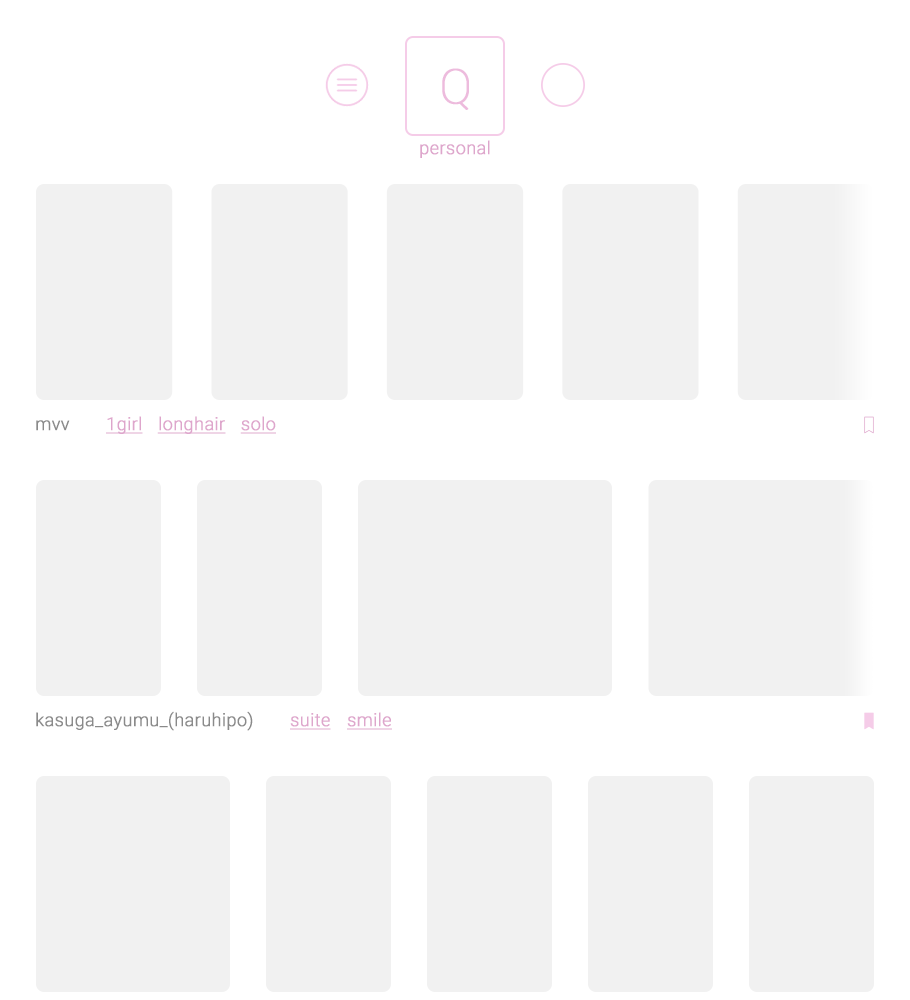
<style>
.page{position:relative;width:910px;height:1000px;background:#ffffff}
.page>*{position:absolute;margin:0}
.t1{font:48px "Roboto-Thin";color:#edbbdd;font-weight:bold}
.t2{font:18px "Roboto-Light";color:#dea6cc;font-weight:bold}
.t3{font:18px "Roboto-Light";color:#8a8a8a;font-weight:bold}
.t4{font:18px "Roboto-Light";color:#dea6cc;font-weight:bold;text-decoration:underline}
</style>
<div class="page">
<p class="t1" style="left:442px;top:68px;width:27px;height:42px">Q</p>
<p class="t2" style="left:420px;top:140px;width:70px;height:18px">personal</p>
<p class="t3" style="left:36px;top:420px;width:34px;height:11px">mvv</p>
<p class="t4" style="left:106px;top:416px;width:37px;height:18px">1girl</p>
<p class="t4" style="left:157px;top:416px;width:69px;height:18px">longhair</p>
<p class="t4" style="left:240px;top:416px;width:36px;height:18px">solo</p>
<p class="t3" style="left:36px;top:711px;width:217px;height:20px">kasuga_ayumu_(haruhipo)</p>
<p class="t4" style="left:290px;top:713px;width:41px;height:17px">suite</p>
<p class="t4" style="left:347px;top:712px;width:45px;height:18px">smile</p>
</div>
